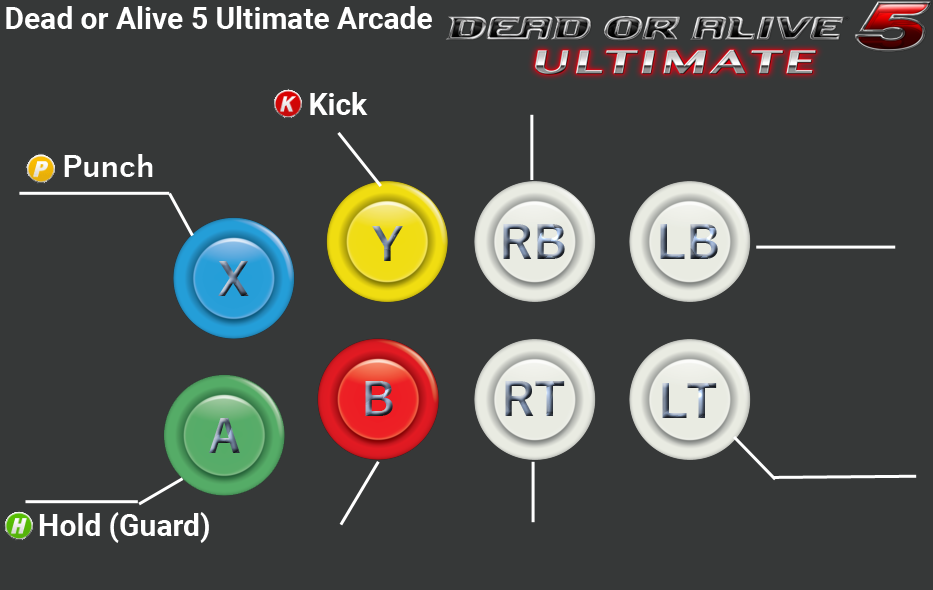
<style>
.page{position:relative;width:933px;height:590px;background:#363838}
.page>*{position:absolute;margin:0}
.t1{font:30px "Roboto-Bold";color:#ffffff}
.t2{font:30px "YuGothic-Bold";color:#ffffff}
</style>
<div class="page">
<p class="t1" style="left:6px;top:6px;width:426px;height:23px">Dead or Alive 5 Ultimate Arcade</p>
<p class="t1" style="left:310px;top:92px;width:58px;height:23px">Kick</p>
<p class="t2" style="left:64px;top:154px;width:89px;height:23px">Punch</p>
<p class="t1" style="left:39px;top:512px;width:170px;height:31px">Hold (Guard)</p>
</div>
